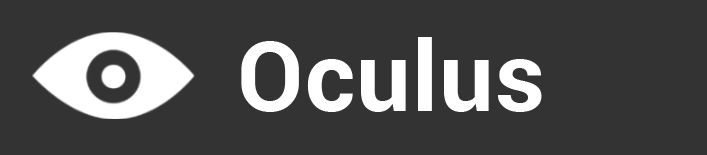
<style>
.page{position:relative;width:707px;height:155px;background:#333333}
.page>*{position:absolute;margin:0}
.t1{font:97px "Roboto-Bold";letter-spacing:0.01em;color:#ffffff}
</style>
<div class="page">
<p class="t1" style="left:241px;top:37px;width:301px;height:75px">Oculus</p>
</div>
